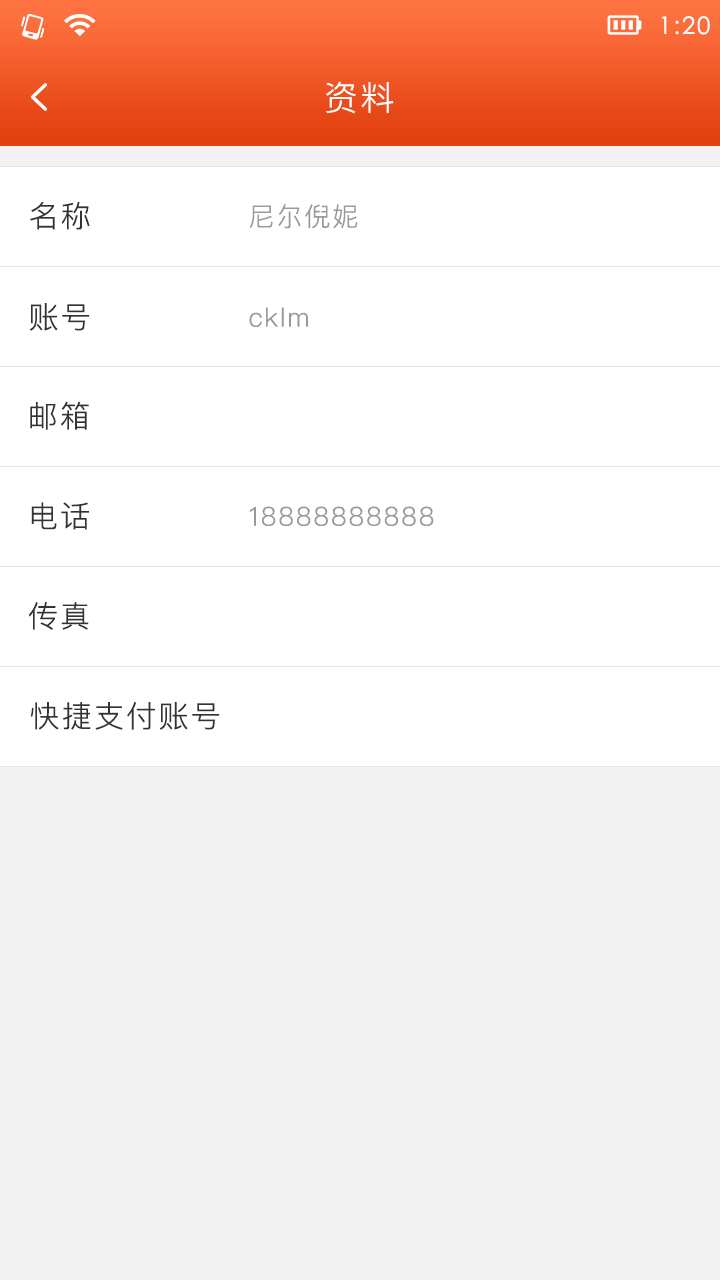
<style>
.page{position:relative;width:720px;height:1280px;background:#ffffff}
.page>*{position:absolute;margin:0}
.t1{font:24px "STXihei";letter-spacing:0.075em;color:#ffffff}
.t2{font:34px "PingFangSC-Light";letter-spacing:0.075em;color:#ffffff}
.t3{font:30px "PingFangSC-Light";letter-spacing:0.075em;color:#333333}
.t4{font:26px "PingFangSC-Light";letter-spacing:0.075em;color:#999999}
</style>
<div class="page">
<p class="t1" style="left:661px;top:16px;width:49px;height:19px">1:20</p>
<p class="t2" style="left:326px;top:81px;width:68px;height:33px">资料</p>
<p class="t3" style="left:30px;top:202px;width:60px;height:28px">名称</p>
<p class="t4" style="left:249px;top:204px;width:109px;height:25px">尼尔倪妮</p>
<p class="t3" style="left:29px;top:303px;width:61px;height:28px">账号</p>
<p class="t4" style="left:249px;top:307px;width:59px;height:20px">cklm</p>
<p class="t3" style="left:30px;top:401px;width:59px;height:29px">邮箱</p>
<p class="t3" style="left:31px;top:502px;width:58px;height:28px">电话</p>
<p class="t4" style="left:249px;top:506px;width:185px;height:20px">18888888888</p>
<p class="t3" style="left:28px;top:602px;width:61px;height:28px">传真</p>
<p class="t3" style="left:30px;top:701px;width:190px;height:29px">快捷支付账号</p>
</div>
